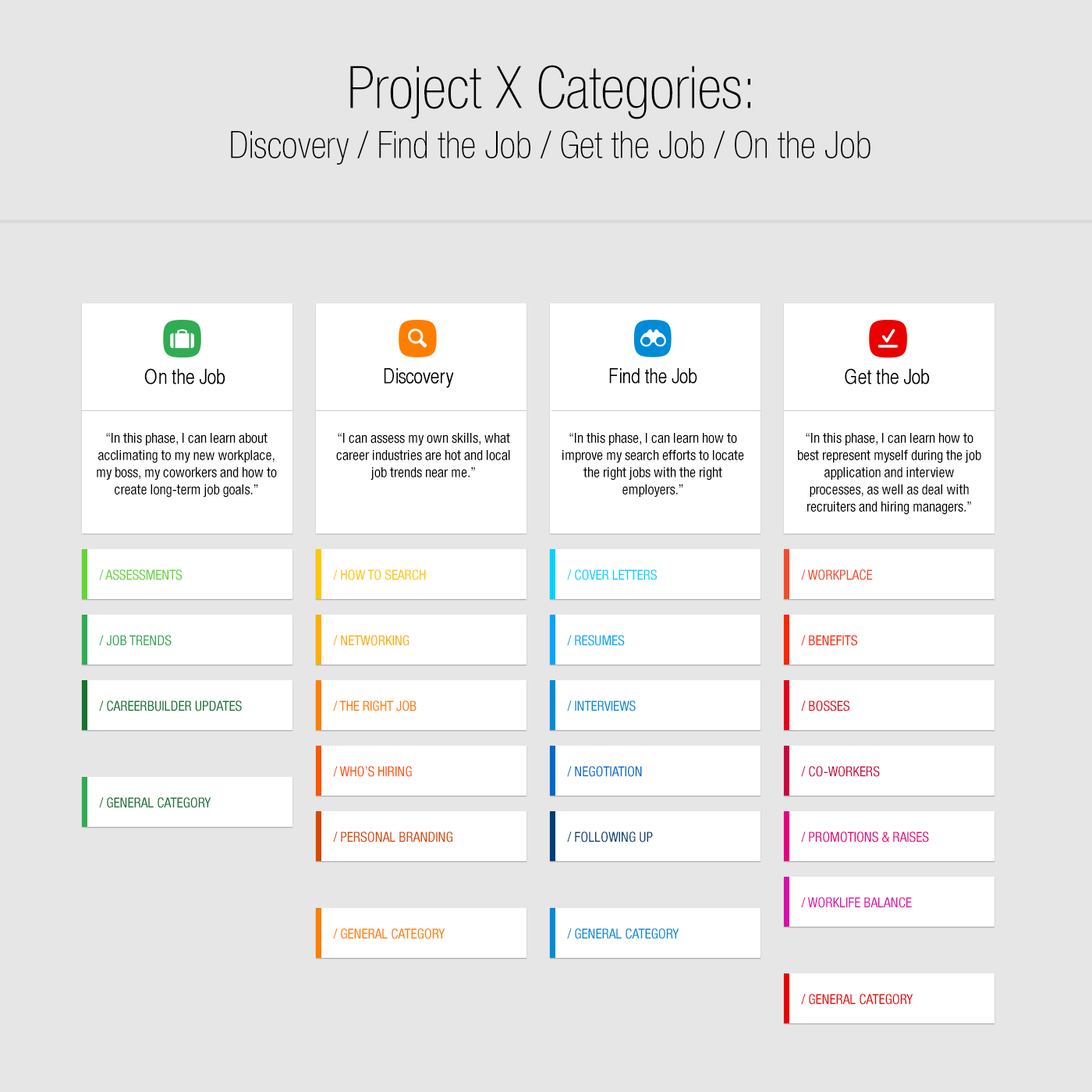
<style>
.page{position:relative;width:1092px;height:1092px;background:#e6e6e6}
.page>*{position:absolute;margin:0}
.t1{font:37.6px/38.3px "HelveticaNeueLTStd-ThCn";color:#000000}
.t2{font:58.7px/11.7px "HelveticaNeueLTStd-ThCn";color:#000000}
.t3{font:20.5px "HelveticaCYPlain";color:#000000}
.t4{font:20.3px "HelveticaCYPlain";color:#000000}
.t5{font:20.2px "HelveticaCYPlain";color:#000000}
.t6{font:14px/17.2px "HelveticaNeueLTStd-Cn";color:#000000}
.t7{font:14px "HelveticaNeueLTStd-Cn";color:#64d438;text-transform:uppercase}
.t8{font:14px "HelveticaNeueLTStd-Cn";color:#ffc600;text-transform:uppercase}
.t9{font:14px "HelveticaNeueLTStd-Cn";color:#00d2ff;text-transform:uppercase}
.t10{font:14px "HelveticaNeueLTStd-Cn";color:#f6492c;text-transform:uppercase}
.t11{font:14px "HelveticaNeueLTStd-Cn";color:#30ac52;text-transform:uppercase}
.t12{font:14px "HelveticaNeueLTStd-Cn";color:#ffae00;text-transform:uppercase}
.t13{font:14px "HelveticaNeueLTStd-Cn";color:#00a6ff;text-transform:uppercase}
.t14{font:14px "HelveticaNeueLTStd-Cn";color:#ff2400;text-transform:uppercase}
.t15{font:14px "HelveticaNeueLTStd-Cn";color:#177230;text-transform:uppercase}
.t16{font:14px "HelveticaNeueLTStd-Cn";color:#ff7e00;text-transform:uppercase}
.t17{font:14px "HelveticaNeueLTStd-Cn";color:#008bd6;text-transform:uppercase}
.t18{font:14px "HelveticaNeueLTStd-Cn";color:#de001a;text-transform:uppercase}
.t19{font:14px "HelveticaNeueLTStd-Cn";color:#ff5400;text-transform:uppercase}
.t20{font:14px "HelveticaNeueLTStd-Cn";color:#006ad6;text-transform:uppercase}
.t21{font:14px "HelveticaNeueLTStd-Cn";color:#cc053d;text-transform:uppercase}
.t22{font:14px "HelveticaNeueLTStd-Cn";color:#d84700;text-transform:uppercase}
.t23{font:14px "HelveticaNeueLTStd-Cn";color:#003d7b;text-transform:uppercase}
.t24{font:14px "HelveticaNeueLTStd-Cn";color:#e7007d;text-transform:uppercase}
.t25{font:14px "HelveticaNeueLTStd-Cn";color:#db0cad;text-transform:uppercase}
.t26{font:14px "HelveticaNeueLTStd-Cn";color:#ea0000;text-transform:uppercase}
</style>
<div class="page">
<p class="t1" style="left:231px;top:65px;width:639px;height:100px;text-align:center"><span class="t2">Project X Categories:<br><br></span>Discovery / Find the Job / Get the Job / On the Job</p>
<p class="t3" style="left:144px;top:368px;width:81px;height:17px">On the Job</p>
<p class="t4" style="left:384px;top:368px;width:70px;height:20px">Discovery</p>
<p class="t5" style="left:609px;top:368px;width:88px;height:16px">Find the Job</p>
<p class="t3" style="left:845px;top:368px;width:85px;height:17px">Get the Job</p>
<p class="t6" style="left:97px;top:433px;width:180px;height:65px;text-align:center">“In this phase, I can learn about acclimating to my new workplace, my boss, my coworkers and how to create long-term job goals.”</p>
<p class="t6" style="left:336px;top:433px;width:174px;height:47px;text-align:center">“I can assess my own skills, what career industries are hot and local job trends near me.”</p>
<p class="t6" style="left:562px;top:433px;width:182px;height:64px;text-align:center">“In this phase, I can learn how to improve my search efforts to locate the right jobs with the right employers.”</p>
<p class="t6" style="left:798px;top:433px;width:183px;height:82px;text-align:center">“In this phase, I can learn how to best represent myself during the job application and interview processes, as well as deal with recruiters and hiring managers.”</p>
<p class="t7" style="left:99px;top:569px;width:84px;height:11px">/ ASSESSMENTS</p>
<p class="t8" style="left:333px;top:569px;width:93px;height:11px">/ How to Search</p>
<p class="t9" style="left:567px;top:569px;width:90px;height:11px">/ Cover Letters</p>
<p class="t10" style="left:801px;top:569px;width:72px;height:11px">/ Workplace</p>
<p class="t11" style="left:99px;top:635px;width:73px;height:11px">/ JOB TRENDS</p>
<p class="t12" style="left:333px;top:635px;width:76px;height:11px">/ Networking</p>
<p class="t13" style="left:567px;top:635px;width:58px;height:11px">/ Resumes</p>
<p class="t14" style="left:801px;top:635px;width:56px;height:11px">/ Benefits</p>
<p class="t15" style="left:99px;top:700px;width:143px;height:11px">/ CAREERBUILDER UPDATES</p>
<p class="t16" style="left:333px;top:700px;width:84px;height:11px">/ The right Job</p>
<p class="t17" style="left:567px;top:700px;width:69px;height:11px">/ Interviews</p>
<p class="t18" style="left:801px;top:700px;width:48px;height:11px">/ Bosses</p>
<p class="t19" style="left:333px;top:766px;width:79px;height:11px">/ Who’s hiring</p>
<p class="t20" style="left:567px;top:766px;width:75px;height:11px">/ Negotiation</p>
<p class="t21" style="left:801px;top:766px;width:79px;height:11px">/ Co-Workers</p>
<p class="t15" style="left:99px;top:797px;width:112px;height:11px">/ General Category</p>
<p class="t22" style="left:333px;top:831px;width:119px;height:11px">/ Personal Branding</p>
<p class="t23" style="left:567px;top:831px;width:86px;height:11px">/ Following Up</p>
<p class="t24" style="left:801px;top:831px;width:128px;height:11px">/ Promotions &amp; RaIses</p>
<p class="t25" style="left:801px;top:897px;width:111px;height:11px">/ WorkLife Balance</p>
<p class="t16" style="left:333px;top:928px;width:112px;height:11px">/ GENERAL CATEGORY</p>
<p class="t17" style="left:567px;top:928px;width:112px;height:11px">/ General Category</p>
<p class="t26" style="left:801px;top:994px;width:112px;height:11px">/ General Category</p>
</div>
